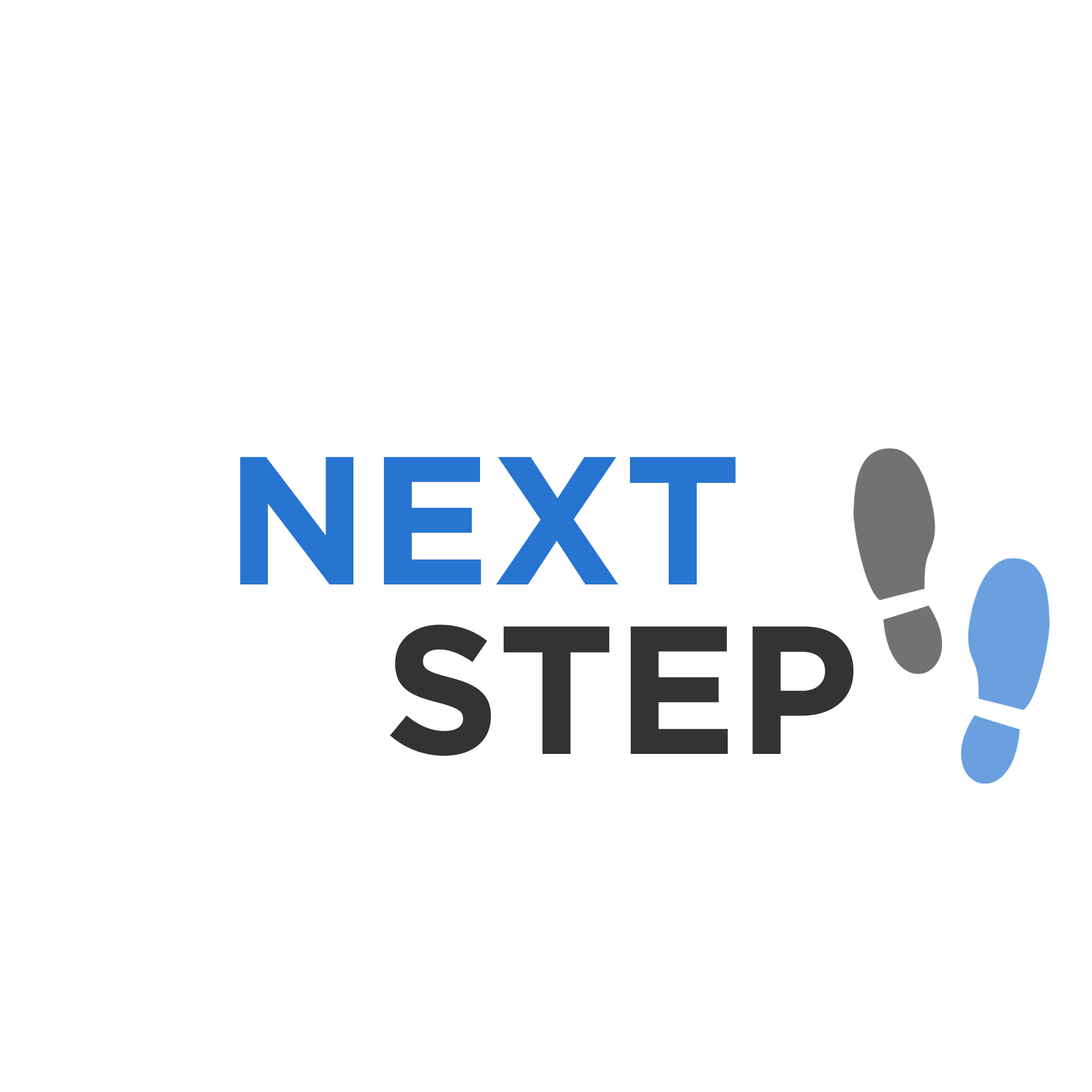
<style>
.page{position:relative;width:1092px;height:1092px;background:#ffffff}
.page>*{position:absolute;margin:0}
.t1{font:182px "Gotham-Bold";color:#2775d1}
.t2{font:182px "Gotham-Bold";color:#333333}
</style>
<div class="page">
<p class="t1" style="left:240px;top:457px;width:496px;height:127px">NEXT</p>
<p class="t2" style="left:390px;top:625px;width:463px;height:131px">STEP</p>
</div>
